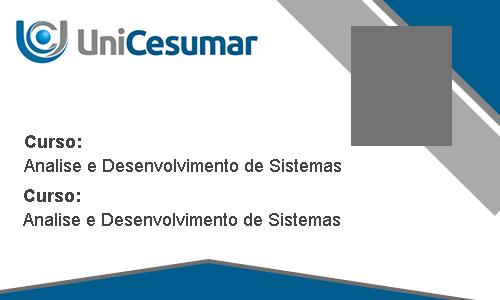
<style>
.page{position:relative;width:500px;height:300px;background:#ffffff}
.page>*{position:absolute;margin:0}
.t1{font:18px "Arial-BoldMT";color:#434343}
.t2{font:17.8px "ArialMT";color:#434343}
</style>
<div class="page">
<p class="t1" style="left:25px;top:135px;width:56px;height:13px">Curso:</p>
<p class="t2" style="left:24px;top:159px;width:317px;height:13px">Analise e Desenvolvimento de Sistemas</p>
<p class="t1" style="left:24px;top:189px;width:56px;height:13px">Curso:</p>
<p class="t2" style="left:23px;top:213px;width:317px;height:13px">Analise e Desenvolvimento de Sistemas</p>
</div>
